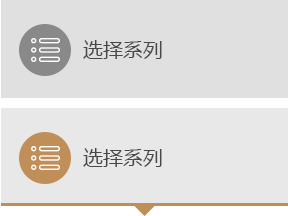
<style>
.page{position:relative;width:288px;height:216px;background:#e0e0e0}
.page>*{position:absolute;margin:0}
.t1{font:20px "MicrosoftYaHei";color:#484848}
</style>
<div class="page">
<p class="t1" style="left:83px;top:40px;width:79px;height:19px">选择系列</p>
<p class="t1" style="left:83px;top:148px;width:79px;height:19px">选择系列</p>
</div>
